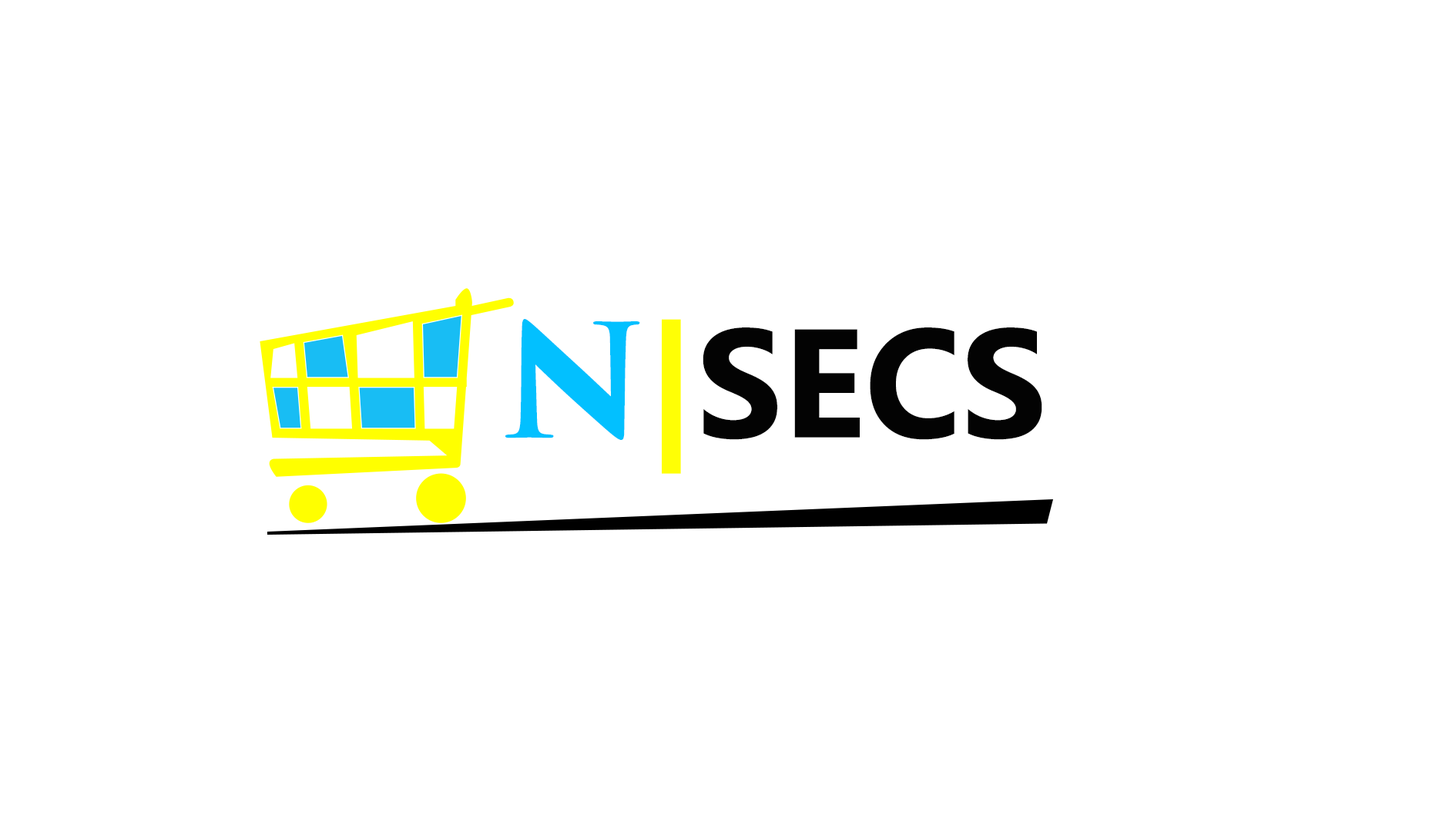
<style>
.page{position:relative;width:1456px;height:819px;background:#ffffff}
.page>*{position:absolute;margin:0}
.t1{font:154.1px "Gadugi-Bold";color:#030303}
.t2{font:154.1px "TrajanPro3-Bold";color:#02c0ff}
.t3{font:154.1px "Gadugi-Bold";color:#ffff05}
</style>
<div class="page">
<p class="t1" style="left:505px;top:319px;width:537px;height:155px"><span class="t2">N</span><span class="t3">|</span>SECS</p>
</div>
